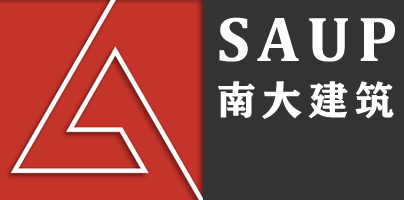
<style>
.page{position:relative;width:404px;height:200px;background:#333333}
.page>*{position:absolute;margin:0}
.t1{font:64px "Cambria-Bold";letter-spacing:0.12em;color:#ffffff}
.t2{font:40px "FZCHSJW--GB1-0";letter-spacing:0.15em;color:#ffffff}
</style>
<div class="page">
<p class="t1" style="left:219px;top:17px;width:176px;height:45px">SAUP</p>
<p class="t2" style="left:218px;top:81px;width:176px;height:38px">南大建筑</p>
</div>
